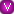
<style>
.page{position:relative;width:14px;height:14px}
.page>*{position:absolute;margin:0}
.t1{font:11px "ArialMT";letter-spacing:-0.05em;color:#ffffff}
</style>
<div class="page">
<p class="t1" style="left:4px;top:3px;width:7px;height:8px">V</p>
</div>
